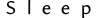
<style>
.page{position:relative;width:98px;height:18px;background:#ffffff}
.page>*{position:absolute;margin:0}
.t1{font:18.7px "Amira-Roman";letter-spacing:0.17em;color:#000000}
</style>
<div class="page">
<p class="t1" style="left:6px;top:0px;width:85px;height:19px;opacity:0.96">S l e e p</p>
</div>
